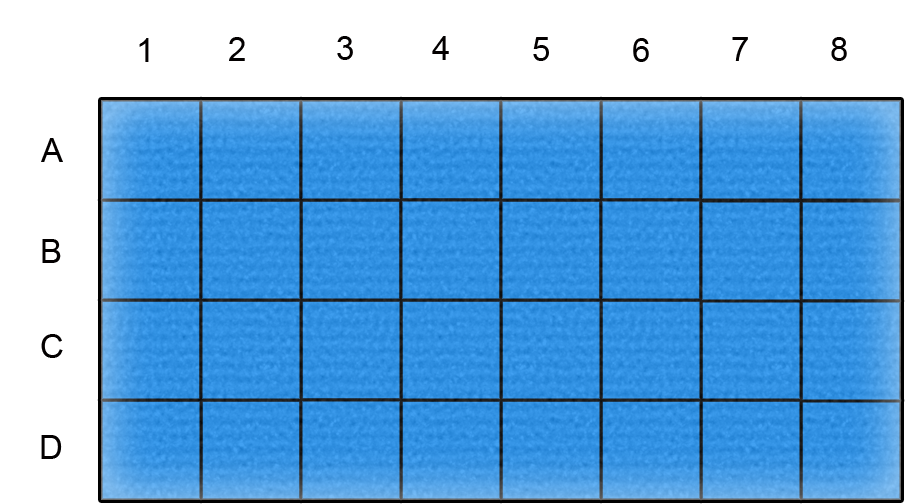
<style>
.page{position:relative;width:905px;height:504px;background:#ffffff}
.page>*{position:absolute;margin:0}
.t1{font:33.3px "ArialMT";color:#030000}
</style>
<div class="page">
<p class="t1" style="left:139px;top:38px;width:10px;height:24px">1</p>
<p class="t1" style="left:229px;top:37px;width:16px;height:24px">2</p>
<p class="t1" style="left:337px;top:36px;width:16px;height:24px">3</p>
<p class="t1" style="left:432px;top:36px;width:17px;height:24px">4</p>
<p class="t1" style="left:533px;top:37px;width:16px;height:24px">51</p>
<p class="t1" style="left:633px;top:38px;width:16px;height:24px">6</p>
<p class="t1" style="left:732px;top:37px;width:16px;height:24px">7</p>
<p class="t1" style="left:831px;top:37px;width:16px;height:24px">8</p>
<p class="t1" style="left:41px;top:138px;width:22px;height:24px">A</p>
<p class="t1" style="left:42px;top:239px;width:19px;height:24px">B</p>
<p class="t1" style="left:41px;top:334px;width:22px;height:24px">C</p>
<p class="t1" style="left:41px;top:435px;width:21px;height:24px">D</p>
</div>
